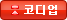
<style>
.page{position:relative;width:67px;height:20px}
.page>*{position:absolute;margin:0}
.t1{font:11px "Dotum";color:#ffffff;font-weight:bold}
</style>
<div class="page">
<p class="t1" style="left:24px;top:5px;width:33px;height:10px">코디업</p>
</div>
